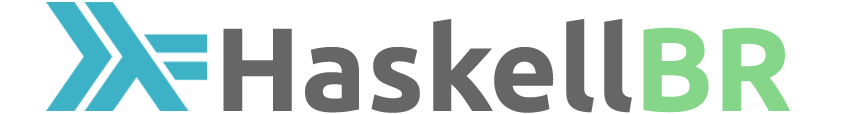
<style>
.page{position:relative;width:842px;height:114px;background:#ffffff}
.page>*{position:absolute;margin:0}
.t1{font:118.5px "Ubuntu-Bold";color:#666666}
.t2{font:118.5px "Ubuntu-Bold";color:#85d689}
</style>
<div class="page">
<p class="t1" style="left:223px;top:19px;width:567px;height:94px">Haskell<span class="t2">BR</span></p>
</div>
